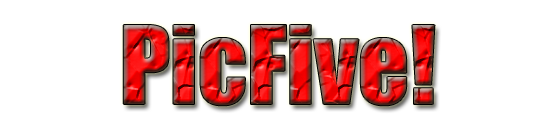
<style>
.page{position:relative;width:548px;height:132px;background:#ffffff}
.page>*{position:absolute;margin:0}
.t1{font:100px "Impact"}
</style>
<div class="page">
<p class="t1" style="left:123px;top:25px;width:312px;height:81px">PicFive!</p>
</div>
